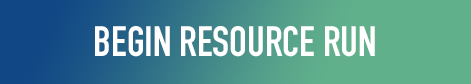
<style>
.page{position:relative;width:471px;height:84px}
.page>*{position:absolute;margin:0}
.t1{font:41.7px "DINCondensed-Bold";color:#ffffff}
</style>
<div class="page">
<p class="t1" style="left:95px;top:26px;width:280px;height:31px">BEGIN RESOURCE RUN</p>
</div>
